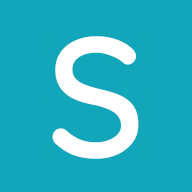
<style>
.page{position:relative;width:192px;height:192px;background:#11a6b9}
.page>*{position:absolute;margin:0}
.t1{font:170px "Quicksand-SemiBold";color:#ffffff}
</style>
<div class="page">
<p class="t1" style="left:52px;top:36px;width:87px;height:123px">S</p>
</div>
